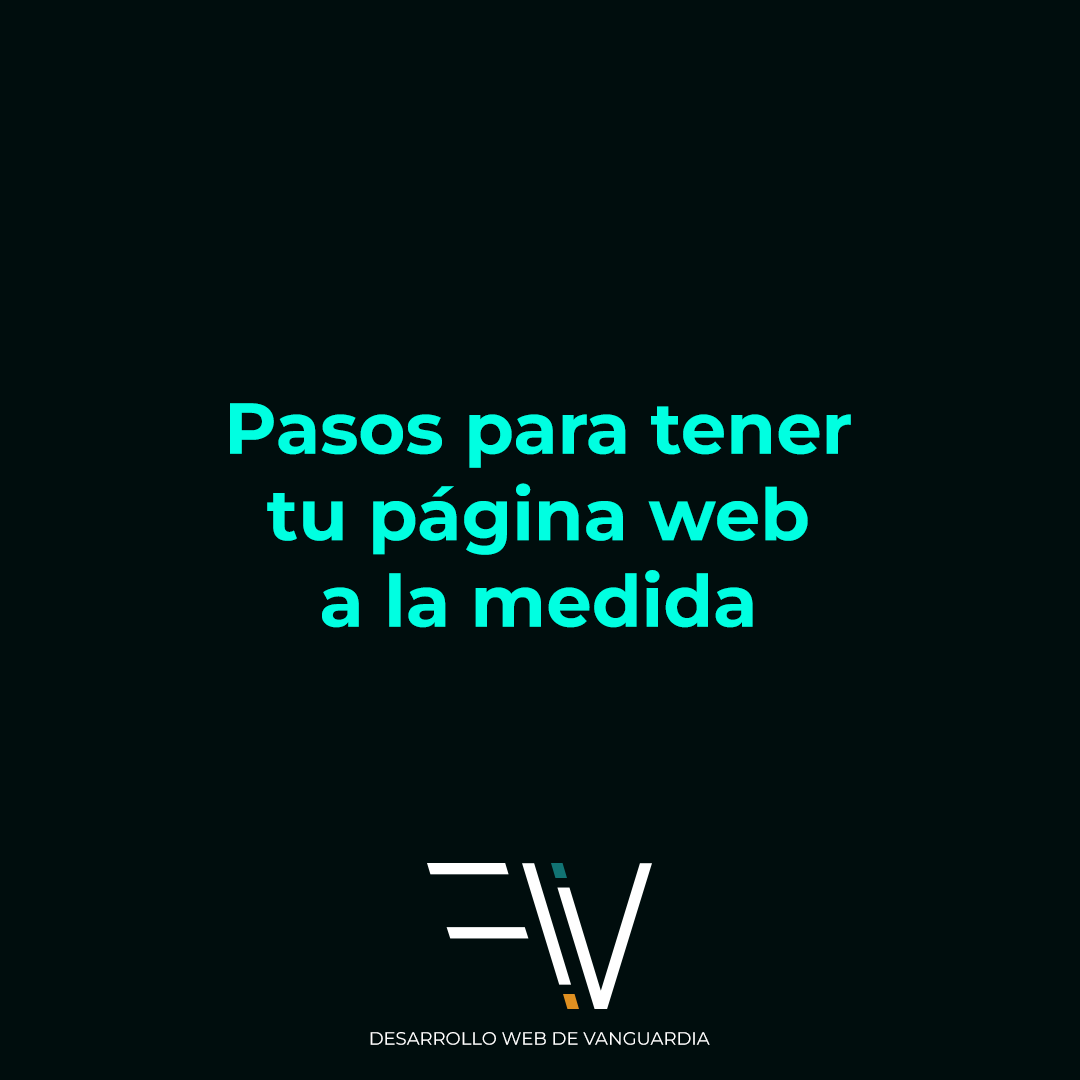
<style>
.page{position:relative;width:1080px;height:1080px;background:#000d0d}
.page>*{position:absolute;margin:0}
.t1{font:72px "MontserratRoman-Bold";color:#00ffe1}
.t2{font:18px "MontserratRoman-Regular";color:#ffffff}
</style>
<div class="page">
<p class="t1" style="left:230px;top:403px;width:621px;height:225px;text-align:center">Pasos para tener<br> tu página web <br>a la medida</p>
<p class="t2" style="left:370px;top:1032px;width:340px;height:13px">DESARROLLO WEB DE VANGUARDIA</p>
</div>
